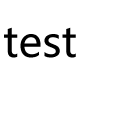
<style>
.page{position:relative;width:128px;height:128px;background:#ffffff}
.page>*{position:absolute;margin:0}
.t1{font:41.7px "MicrosoftYaHei";color:#000000}
</style>
<div class="page">
<p class="t1" style="left:4px;top:27px;width:72px;height:31px">test</p>
</div>
